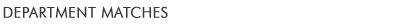
<style>
.page{position:relative;width:400px;height:24px;background:#ffffff}
.page>*{position:absolute;margin:0}
.t1{font:14.7px "FuturaBT-Light";letter-spacing:0.025em;color:#363636;text-transform:uppercase;font-weight:bold}
</style>
<div class="page">
<p class="t1" style="left:3px;top:6px;width:165px;height:12px">DEPARTMENT MATCHES</p>
</div>
